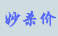
<style>
.page{position:relative;width:58px;height:36px;background:#cfdde1}
.page>*{position:absolute;margin:0}
.t1{font:18px "STXingkai";color:#5467f5}
</style>
<div class="page">
<p class="t1" style="left:5px;top:10px;width:52px;height:18px">妙杀价</p>
</div>
